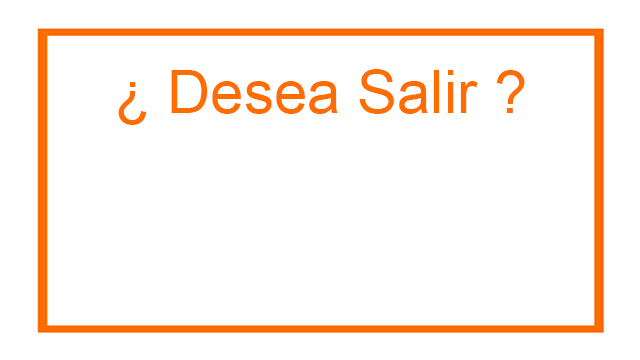
<style>
.page{position:relative;width:640px;height:360px;background:#ffffff}
.page>*{position:absolute;margin:0}
.t1{font:60px "ArialMT";color:#ff6c00}
</style>
<div class="page">
<p class="t1" style="left:118px;top:69px;width:407px;height:56px">¿ Desea Salir ?</p>
</div>
